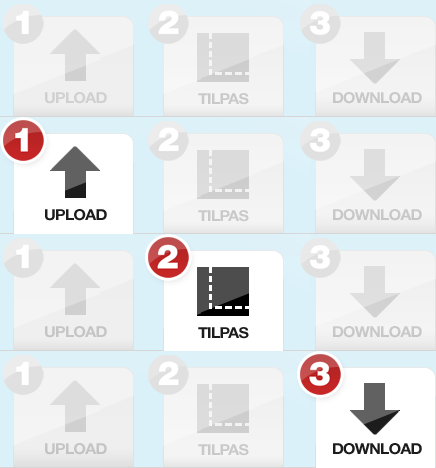
<style>
.page{position:relative;width:436px;height:468px}
.page>*{position:absolute;margin:0}
.t1{font:15.2px "HelveticaNeueLTStd-Bd";letter-spacing:-0.05em;color:#d0d0d0;text-transform:uppercase;scale:1.05 1}
.t2{font:15.2px "HelveticaNeueLTStd-Bd";letter-spacing:-0.05em;color:#c9c9c9;text-transform:uppercase;scale:1.05 1}
.t3{font:15.2px "HelveticaNeueLTStd-Bd";letter-spacing:-0.05em;color:#c8c8c8;text-transform:uppercase;scale:1.05 1}
.t4{font:15.2px "HelveticaNeueLTStd-Bd";letter-spacing:-0.05em;color:#1c1c1c;text-transform:uppercase;scale:1.05 1}
.t5{font:15.2px "HelveticaNeueLTStd-Bd";letter-spacing:-0.05em;color:#c5c5c5;text-transform:uppercase;scale:1.05 1}
.t6{font:15.2px "HelveticaNeueLTStd-Bd";letter-spacing:-0.05em;color:#c4c4c4;text-transform:uppercase;scale:1.05 1}
</style>
<div class="page">
<p class="t1" style="left:45px;top:92px;width:62px;height:12px">Upload</p>
<p class="t2" style="left:198px;top:93px;width:51px;height:12px">Tilpas</p>
<p class="t3" style="left:333px;top:92px;width:89px;height:12px">Download</p>
<p class="t4" style="left:45px;top:209px;width:62px;height:12px">Upload</p>
<p class="t3" style="left:333px;top:209px;width:89px;height:12px">Download</p>
<p class="t2" style="left:198px;top:210px;width:51px;height:12px">Tilpas</p>
<p class="t5" style="left:45px;top:326px;width:62px;height:12px">Upload</p>
<p class="t4" style="left:198px;top:327px;width:51px;height:12px">Tilpas</p>
<p class="t3" style="left:333px;top:326px;width:89px;height:12px">Download</p>
<p class="t6" style="left:45px;top:443px;width:62px;height:12px">Upload</p>
<p class="t2" style="left:198px;top:444px;width:51px;height:12px">Tilpas</p>
<p class="t4" style="left:333px;top:443px;width:89px;height:12px">Download</p>
</div>
